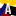
<style>
.page{position:relative;width:16px;height:16px;background:#ffcc00}
.page>*{position:absolute;margin:0}
.t1{font:14.7px "BebasNeueRegular";color:#ffffff}
</style>
<div class="page">
<p class="t1" style="left:5px;top:3px;width:6px;height:11px">А</p>
</div>
